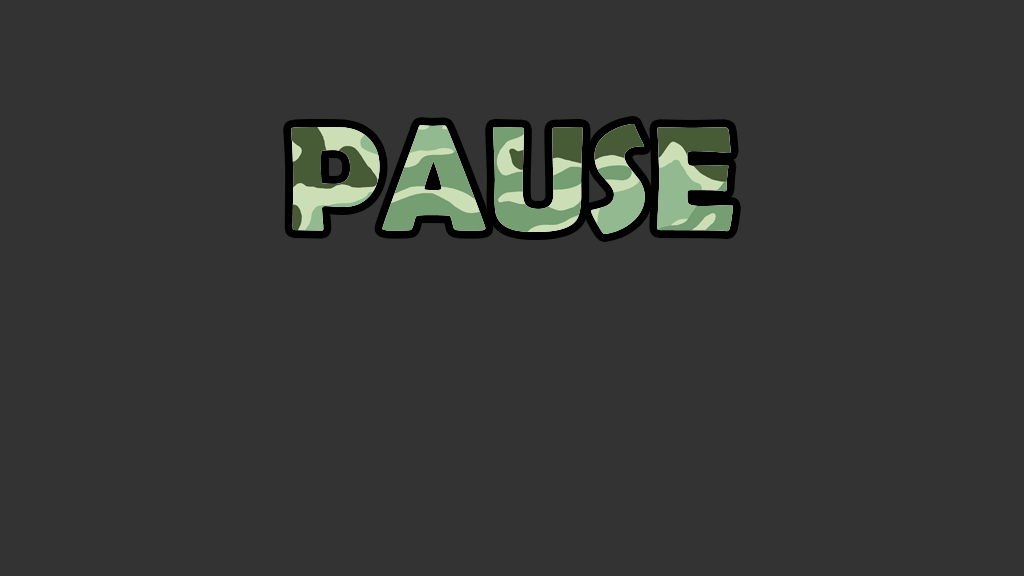
<style>
.page{position:relative;width:1024px;height:576px;background:#333333}
.page>*{position:absolute;margin:0}
.t1{font:150px "BerlinSansFBDemi-Bold"}
</style>
<div class="page">
<p class="t1" style="left:291px;top:124px;width:442px;height:110px">PAUSE</p>
</div>
